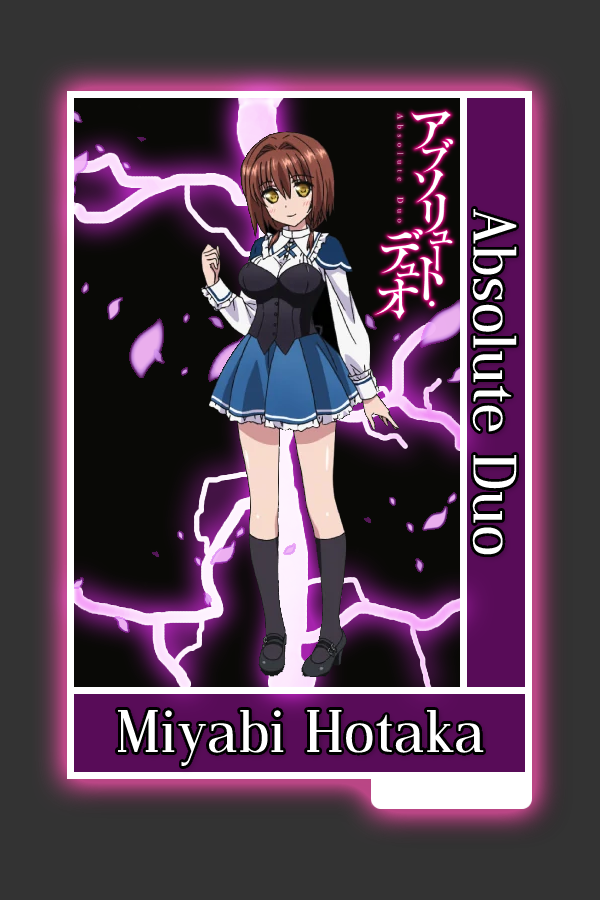
<style>
.page{position:relative;width:600px;height:900px;background:#333333}
.page>*{position:absolute;margin:0}
.t1{font:60px "DustismoRoman";color:#ffffff}
.t2{font:59px "DustismoRoman";color:#ffffff}
</style>
<div class="page">
<p class="t1" style="left:472px;top:208px;width:45px;height:347px;rotate:90deg">Absolute Duo</p>
<p class="t2" style="left:117px;top:709px;width:367px;height:59px">Miyabi Hotaka</p>
</div>
